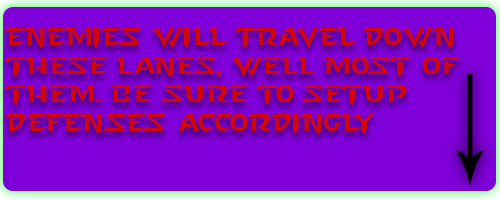
<style>
.page{position:relative;width:500px;height:200px;background:#8000d9}
.page>*{position:absolute;margin:0}
.t1{font:24px "StarcraftNormal";color:#d20606}
</style>
<div class="page">
<p class="t1" style="left:5px;top:28px;width:457px;height:106px">Enemies will travel down these lanes, well most of them. Be sure to setup <br>defenses accordingly</p>
</div>
